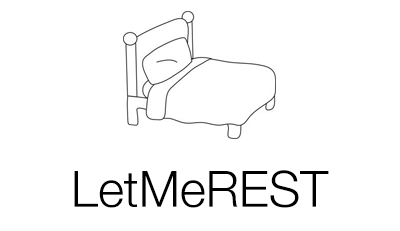
<style>
.page{position:relative;width:400px;height:231px;background:#ffffff}
.page>*{position:absolute;margin:0}
.t1{font:50px "HelveticaNeue-Light";color:#000000}
</style>
<div class="page">
<p class="t1" style="left:74px;top:170px;width:255px;height:38px">LetMeREST</p>
</div>
